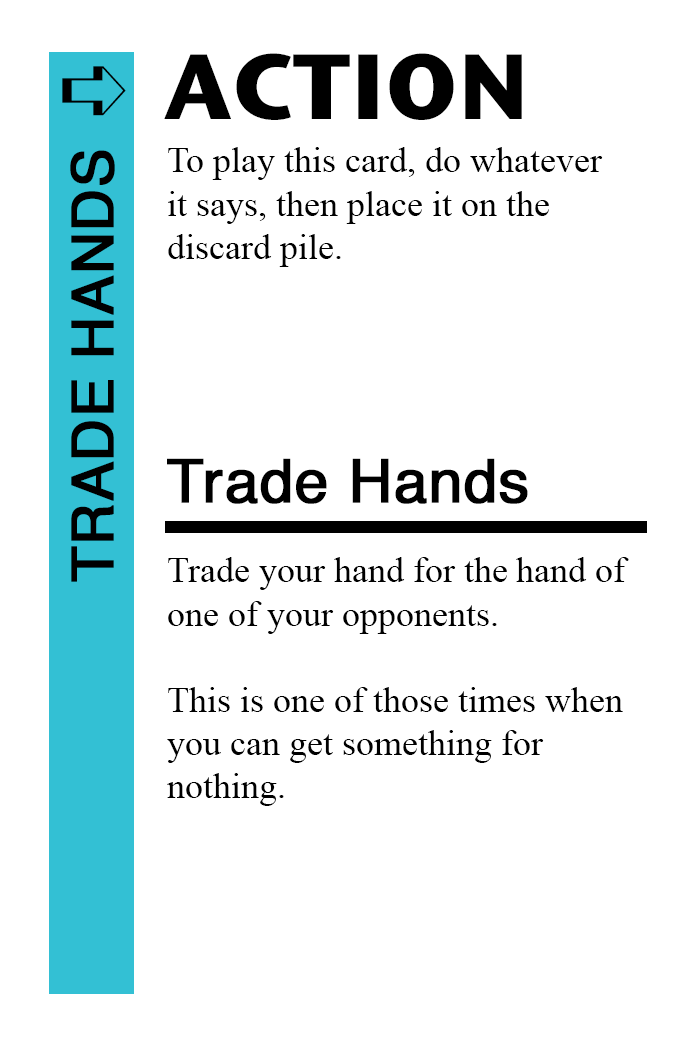
<style>
.page{position:relative;width:700px;height:1042px;background:#ffffff}
.page>*{position:absolute;margin:0}
.t1{font:92px "StoneSansITC-Bold";color:#000000}
.t2{font:82px "MS-Gothic";color:#000000}
.t3{font:58px "Helvetica";color:#000000;font-weight:bold}
.t4{font:36px "TimesNewRomanPSMT";color:#000000}
.t5{font:60px "Helvetica";color:#000000;font-weight:bold}
</style>
<div class="page">
<p class="t1" style="left:164px;top:53px;width:358px;height:67px">ACTION</p>
<p class="t2" style="left:62px;top:66px;width:64px;height:50px">➪</p>
<p class="t3" style="left:70px;top:150px;width:45px;height:432px;rotate:-90deg">TRADE HANDS</p>
<p class="t4" style="left:168px;top:147px;width:435px;height:120px">To play this card, do whatever<br>it says, then place it on the<br>discard pile.</p>
<p class="t5" style="left:167px;top:458px;width:361px;height:46px">Trade Hands</p>
<p class="t4" style="left:167px;top:557px;width:462px;height:249px">Trade your hand for the hand of <br>one of your opponents.<br><br>This is one of those times when<br>you can get something for<br>nothing.</p>
</div>
